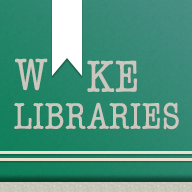
<style>
.page{position:relative;width:192px;height:192px}
.page>*{position:absolute;margin:0}
.t1{font:46px "AmericanTypewriter-Condensed";color:#cbc7bf}
.t2{font:46px "AmericanTypewriter-Condensed";letter-spacing:0.01em;color:#cbc7bf}
.t3{font:38px "AmericanTypewriter-Condensed";color:#cbc7bf}
</style>
<div class="page">
<p class="t1" style="left:15px;top:58px;width:33px;height:33px">W</p>
<p class="t2" style="left:87px;top:60px;width:50px;height:32px">KE</p>
<p class="t3" style="left:14px;top:102px;width:165px;height:28px">LIBRARIES</p>
</div>
